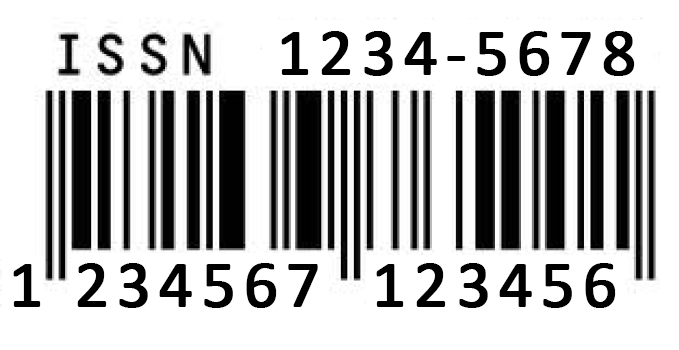
<style>
.page{position:relative;width:679px;height:350px;background:#ffffff}
.page>*{position:absolute;margin:0}
.t1{font:66.7px "Calibri";letter-spacing:0.1em;color:#000000;font-weight:bold}
</style>
<div class="page">
<p class="t1" style="left:281px;top:31px;width:354px;height:45px">1234-5678</p>
<p class="t1" style="left:13px;top:263px;width:305px;height:45px">1 234567</p>
<p class="t1" style="left:376px;top:263px;width:240px;height:45px">123456</p>
</div>
